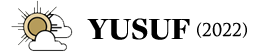
<style>
.page{position:relative;width:260px;height:52px;background:#ffffff}
.page>*{position:absolute;margin:0}
.t1{font:32px "FreightDispProBlack-Regular";color:#000000}
.t2{font:17px "TrajanPro3-Regular";color:#000000}
</style>
<div class="page">
<p class="t1" style="left:87px;top:18px;width:103px;height:22px">YUSUF</p>
<p class="t2" style="left:197px;top:22px;width:50px;height:16px">(2022)</p>
</div>
